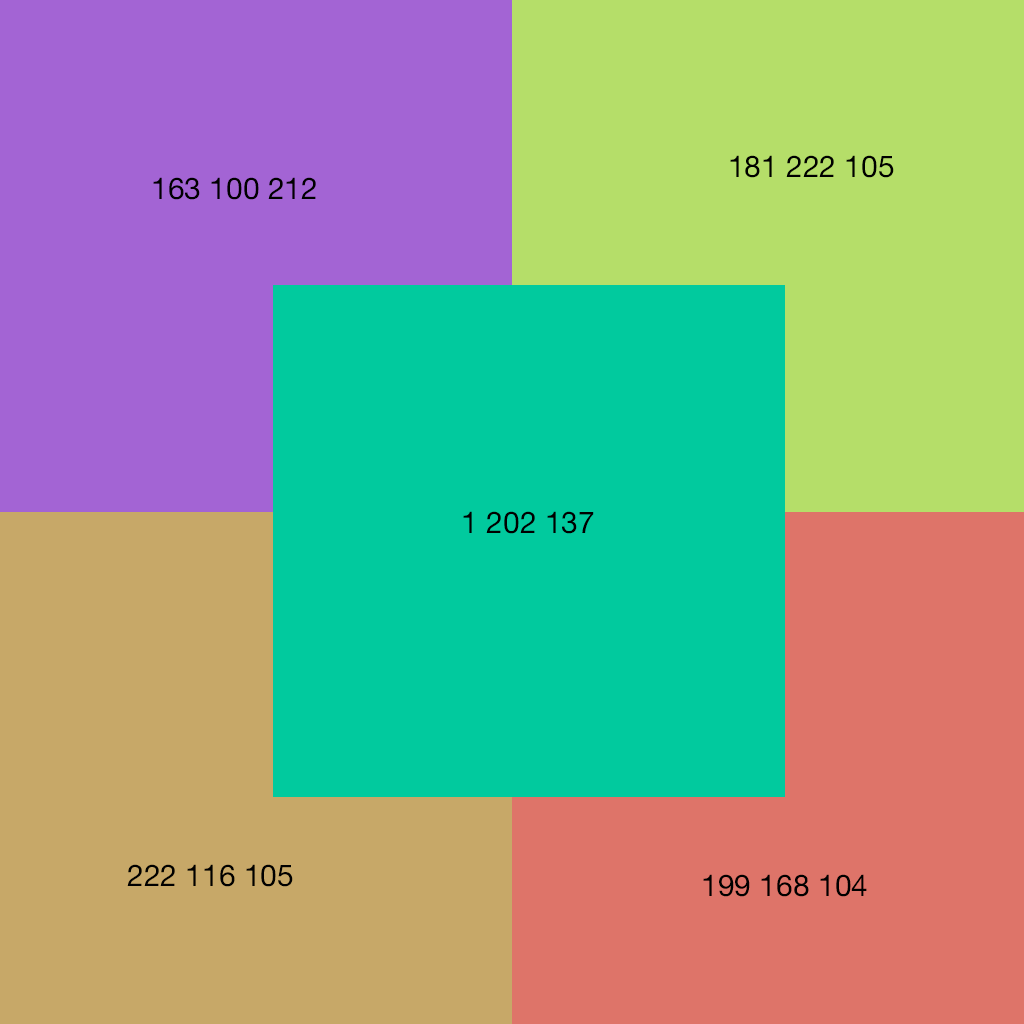
<style>
.page{position:relative;width:1024px;height:1024px;background:#01ca9e}
.page>*{position:absolute;margin:0}
.t1{font:30px "HelveticaNeue";color:#000000}
</style>
<div class="page">
<p class="t1" style="left:730px;top:155px;width:164px;height:23px">181 222 105</p>
<p class="t1" style="left:153px;top:177px;width:163px;height:23px">163 100 212</p>
<p class="t1" style="left:463px;top:511px;width:131px;height:23px">1 202 137</p>
<p class="t1" style="left:127px;top:864px;width:166px;height:23px">222 116 105</p>
<p class="t1" style="left:703px;top:874px;width:164px;height:23px">199 168 104</p>
</div>
